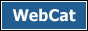
<style>
.page{position:relative;width:88px;height:31px;background:#225d92}
.page>*{position:absolute;margin:0}
.t1{font:16px "Tahoma-Bold";color:#f9fbfd}
</style>
<div class="page">
<p class="t1" style="left:12px;top:8px;width:64px;height:14px">WebCat</p>
</div>
